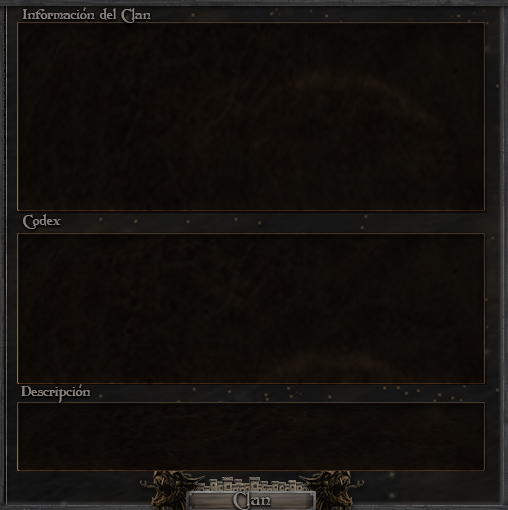
<style>
.page{position:relative;width:508px;height:510px}
.page>*{position:absolute;margin:0}
.t1{font:14.1px "Folkard";color:#88837e}
.t2{font:5.1px "Folkard";color:#88837e;scale:1.8 1}
.t3{font:18.1px "Folkard";color:#88837e}
</style>
<div class="page">
<p class="t1" style="left:22px;top:8px;width:129px;height:15px">Informacion del Clan</p>
<p class="t2" style="left:83px;top:7px;width:3px;height:4px;rotate:24deg">i</p>
<p class="t1" style="left:23px;top:214px;width:38px;height:15px">Codex</p>
<p class="t1" style="left:21px;top:386px;width:70px;height:17px">Descripcion</p>
<p class="t2" style="left:79px;top:384px;width:3px;height:4px;rotate:24deg">i</p>
<p class="t3" style="left:233px;top:491px;width:38px;height:19px">Clan</p>
</div>
